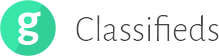
<style>
.page{position:relative;width:219px;height:56px;background:#ffffff}
.page>*{position:absolute;margin:0}
.t1{font:36px "AlegreyaSans-Light";color:#464646}
</style>
<div class="page">
<p class="t1" style="left:76px;top:15px;width:143px;height:26px">Classifieds</p>
</div>
